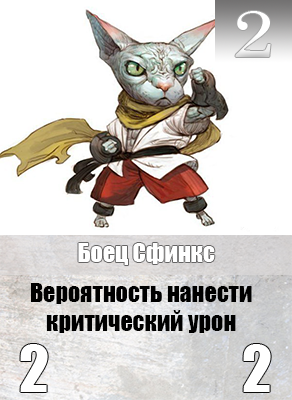
<style>
.page{position:relative;width:292px;height:400px;background:#ffffff}
.page>*{position:absolute;margin:0}
.t1{font:65.6px "Century";color:#ffffff;scale:1.18 1}
.t2{font:24px "Impact";color:#ffffff}
.t3{font:24px "Impact";color:#000000}
</style>
<div class="page">
<p class="t1" style="left:235px;top:11px;width:36px;height:46px">2</p>
<p class="t2" style="left:78px;top:243px;width:137px;height:22px">Боец Сфинкс</p>
<p class="t3" style="left:31px;top:283px;width:221px;height:50px;text-align:center">Вероятность нанести критический урон</p>
</div>
